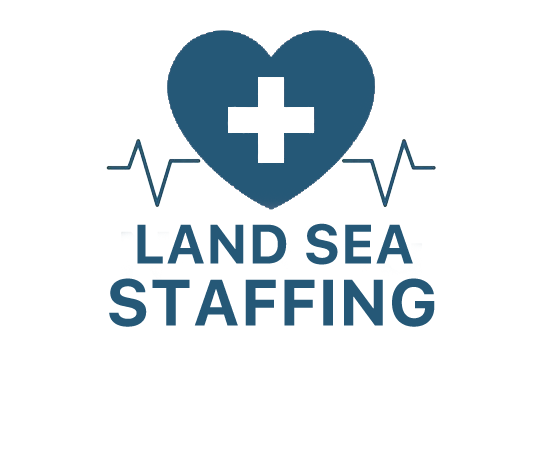
<style>
.page{position:relative;width:542px;height:452px;background:#ffffff}
.page>*{position:absolute;margin:0}
.t1{font:55px "Galvji-Bold";color:#255877}
.t2{font:65px "Galvji-Bold";color:#255877}
</style>
<div class="page">
<p class="t1" style="left:137px;top:223px;width:276px;height:42px">LAND SEA</p>
<p class="t2" style="left:109px;top:278px;width:326px;height:49px">STAFFING</p>
</div>
